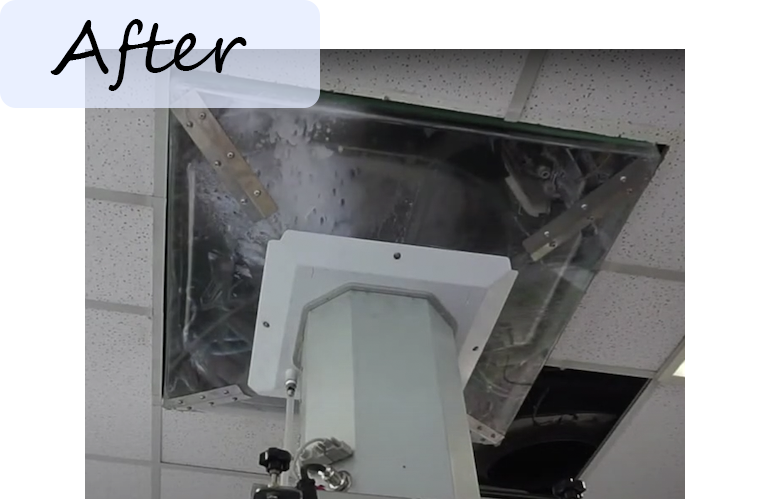
<style>
.page{position:relative;width:770px;height:499px;background:#ffffff}
.page>*{position:absolute;margin:0}
.t1{font:72px "SegoeScript";color:#000000}
</style>
<div class="page">
<p class="t1" style="left:50px;top:19px;width:197px;height:72px">After</p>
</div>
